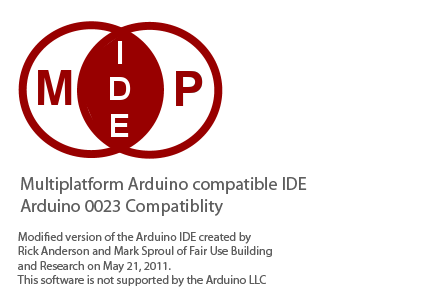
<style>
.page{position:relative;width:425px;height:300px;background:#ffffff}
.page>*{position:absolute;margin:0}
.t1{font:18px "MyriadPro-Regular";color:#5e5e5e}
.t2{font:12px "MyriadPro-Regular";color:#5e5e5e}
</style>
<div class="page">
<p class="t1" style="left:20px;top:177px;width:287px;height:39px">Multiplatform Arduino compatible IDE<br>Arduino 0023 Compatiblity</p>
<p class="t2" style="left:17px;top:232px;width:255px;height:55px">Modified version of the Arduino IDE created by<br>Rick Anderson and Mark Sproul of Fair Use Building<br>and Research on May 21, 2011.<br>This software is not supported by the Arduino LLC</p>
</div>
